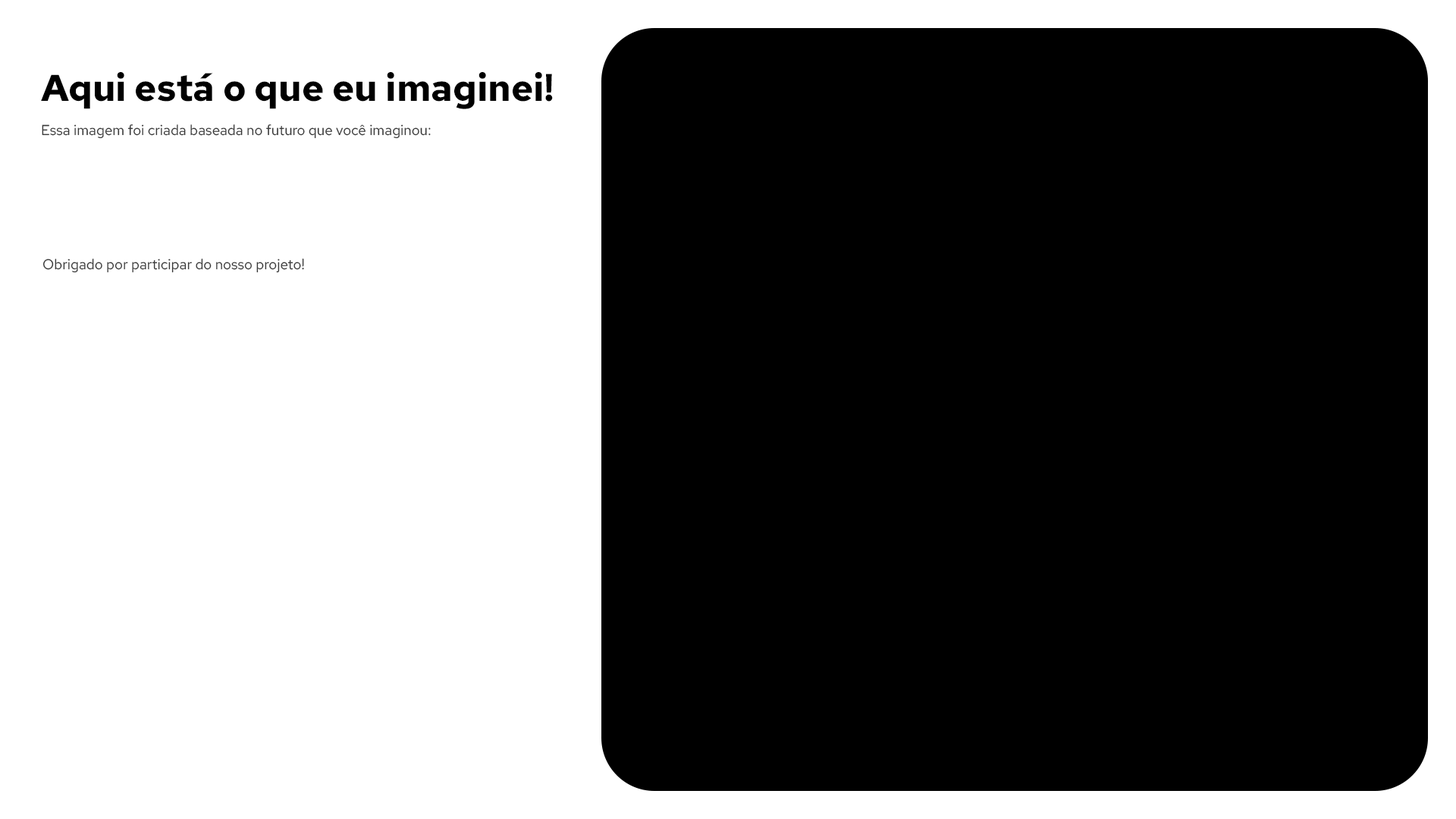
<style>
.page{position:relative;width:1456px;height:819px;background:#000000}
.page>*{position:absolute;margin:0}
.t1{font:37.1px "RedHatText-Bold";color:#000000}
.t2{font:14.2px "RedHatText-Regular";color:#393939}
</style>
<div class="page">
<p class="t1" style="left:41px;top:72px;width:512px;height:37px">Aqui está o que eu imaginei!</p>
<p class="t2" style="left:42px;top:124px;width:389px;height:15px">Essa imagem foi criada baseada no futuro que você imaginou:</p>
<p class="t2" style="left:42px;top:259px;width:262px;height:14px">Obrigado por participar do nosso projeto!</p>
</div>
